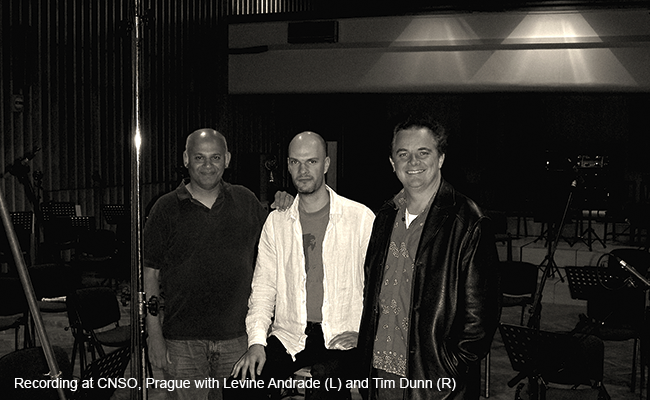
<style>
.page{position:relative;width:650px;height:400px}
.page>*{position:absolute;margin:0}
.t1{font:14px "ArialMT";color:#fefefe}
</style>
<div class="page">
<p class="t1" style="left:15px;top:377px;width:441px;height:14px">Recording at CNSO, Prague with Levine Andrade (L) and Tim Dunn (R)</p>
</div>
